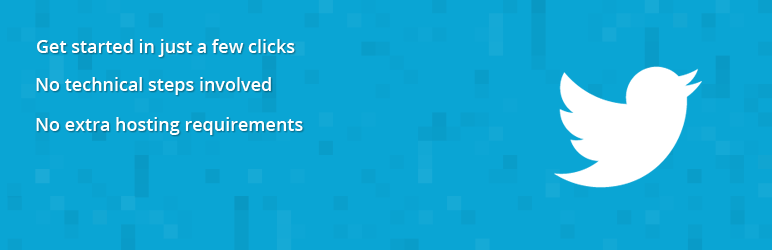
<style>
.page{position:relative;width:772px;height:250px;background:#0aa5d4}
.page>*{position:absolute;margin:0}
.t1{font:18px "OpenSans-Semibold";color:#ffffff}
</style>
<div class="page">
<p class="t1" style="left:37px;top:39px;width:258px;height:18px">Get started in just a few clicks</p>
<p class="t1" style="left:36px;top:77px;width:235px;height:18px">No technical steps involved</p>
<p class="t1" style="left:36px;top:117px;width:267px;height:18px">No extra hosting requirements</p>
</div>
